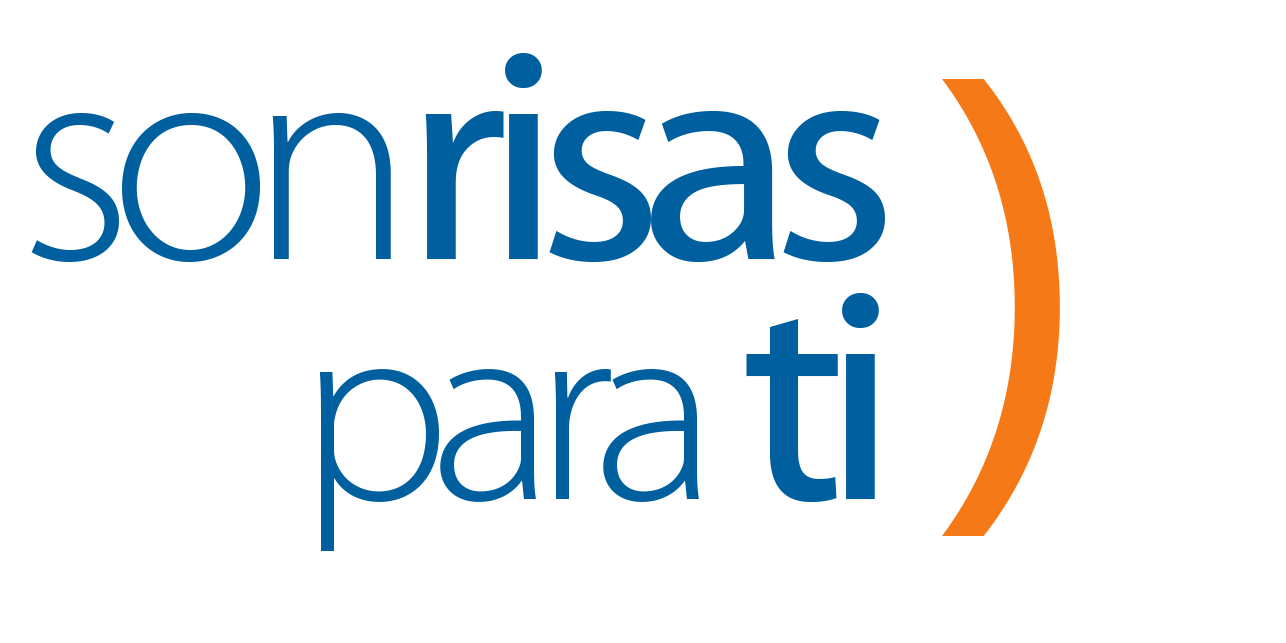
<style>
.page{position:relative;width:1286px;height:643px;background:#ffffff}
.page>*{position:absolute;margin:0}
.t1{font:298.7px/240.7px "MyriadWebPro";letter-spacing:-0.075em;color:#005f9f;scale:1.03 1}
.t2{font:298.7px/240.7px "MyriadPro-Light";letter-spacing:-0.075em;color:#005f9f;scale:1.03 1}
.t3{font:298.7px/240.7px "MyriadPro-Light";letter-spacing:-0.033em;color:#005f9f;scale:1.03 1}
.t4{font:265.1px/240.7px "MyriadPro-Light";letter-spacing:-0.075em;color:#005f9f;scale:1.03 1}
.t5{font:559.7px "MyriadWebPro";letter-spacing:-0.075em;color:#f57917;scale:1.03 1}
</style>
<div class="page">
<p class="t1" style="left:31px;top:53px;width:854px;height:498px;text-align:right"><span class="t2">so</span><span class="t3">n</span>risas<br><span class="t4">para</span> ti</p>
<p class="t5" style="left:942px;top:79px;width:118px;height:457px">)</p>
</div>
